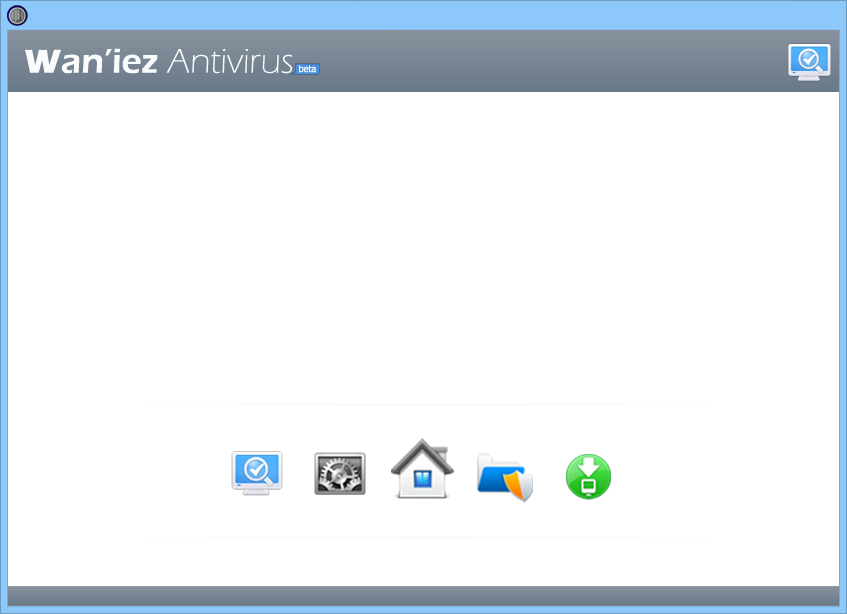
<style>
.page{position:relative;width:847px;height:614px;background:#ffffff}
.page>*{position:absolute;margin:0}
.t1{font:35.5px "ErasITC-Light";color:#fafbfb}
.t2{font:34.2px "ErasITC-Bold";color:#fafbfb}
.t3{font:35.5px "ErasITC-Demi";color:#fafbfb}
</style>
<div class="page">
<p class="t1" style="left:25px;top:48px;width:268px;height:26px"><span class="t2">W</span><span class="t3">an’iez </span>Antivirus</p>
</div>
